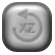
<style>
.page{position:relative;width:55px;height:55px;background:#ffffff}
.page>*{position:absolute;margin:0}
.t1{font:12px "ArialMT";color:#8e8e8e}
</style>
<div class="page">
<p class="t1" style="left:20px;top:24px;width:15px;height:9px">XZ</p>
</div>
